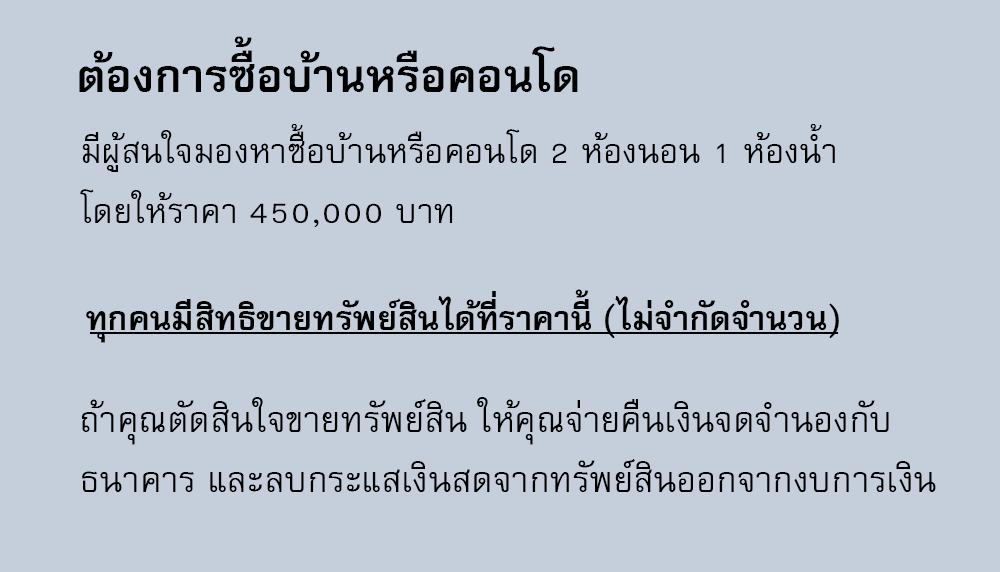
<style>
.page{position:relative;width:1000px;height:572px;background:#c5cedb}
.page>*{position:absolute;margin:0}
.t1{font:64px "FreesiaUPCBold";color:#000000}
.t2{font:48px/60px "FreesiaUPC";color:#000000}
.t3{font:47px "FreesiaUPCBold";color:#000000}
.t4{font:50px/60px "FreesiaUPC";color:#000000}
</style>
<div class="page">
<p class="t1" style="left:79px;top:36px;width:499px;height:56px">ต้องการซื้อบ้านหรือคอนโด</p>
<p class="t2" style="left:80px;top:124px;width:755px;height:103px">มีผู้สนใจมองหาซื้อบ้านหรือคอนโด 2 ห้องนอน 1 ห้องน้ำ <br>โดยให้ราคา 450,000 บาท</p>
<p class="t3" style="left:86px;top:289px;width:753px;height:54px">ทุกคนมีสิทธิขายทรัพย์สินได้ที่ราคานี้ (ไม่จำกัดจำนวน)</p>
<p class="t4" style="left:82px;top:397px;width:854px;height:95px">ถ้าคุณตัดสินใจขายทรัพย์สิน ให้คุณจ่ายคืนเงินจดจำนองกับ<br>ธนาคาร และลบกระแสเงินสดจากทรัพย์สินออกจากงบการเงิน</p>
</div>
